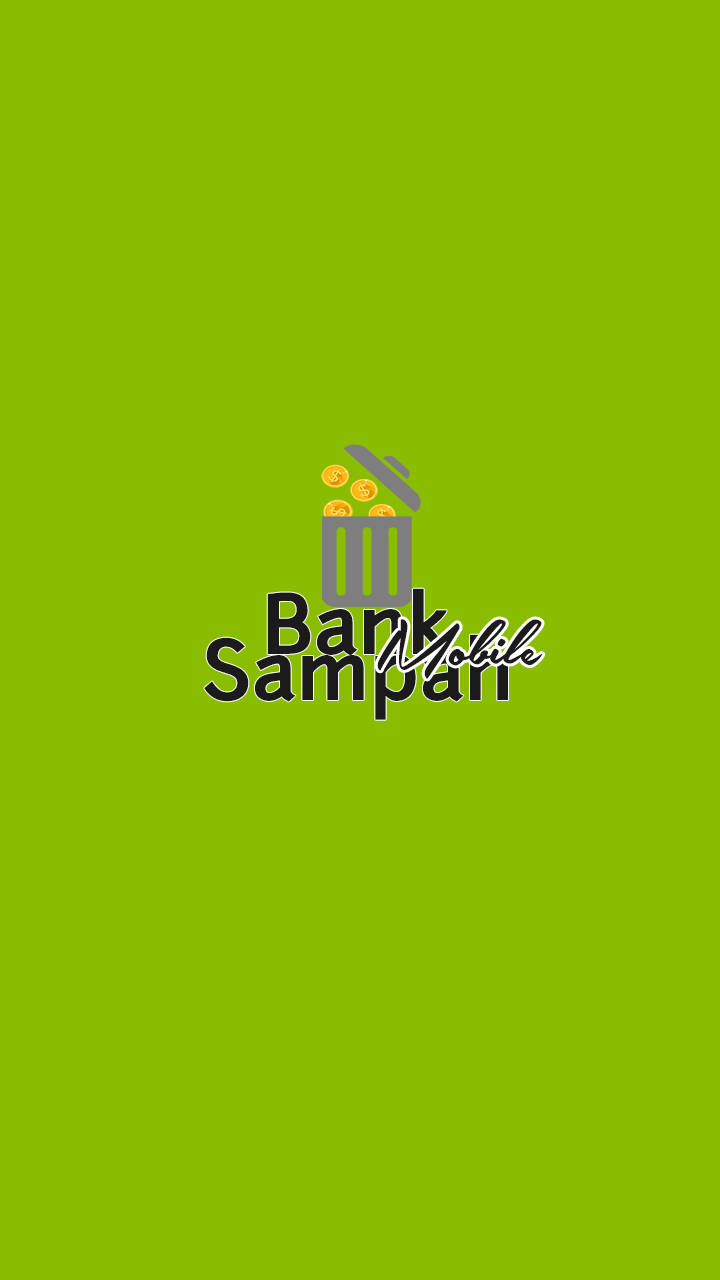
<style>
.page{position:relative;width:720px;height:1280px;background:#8abd00}
.page>*{position:absolute;margin:0}
.t1{font:80px "Junction-Bold";color:#1c1b1b}
.t2{font:80px "SouthernAirePersonalUseOnly";color:#1c1b1b}
</style>
<div class="page">
<p class="t1" style="left:204px;top:588px;width:304px;height:132px;text-align:center">Bank<br>Sampah</p>
<p class="t2" style="left:377px;top:619px;width:166px;height:60px">Mobile</p>
</div>
